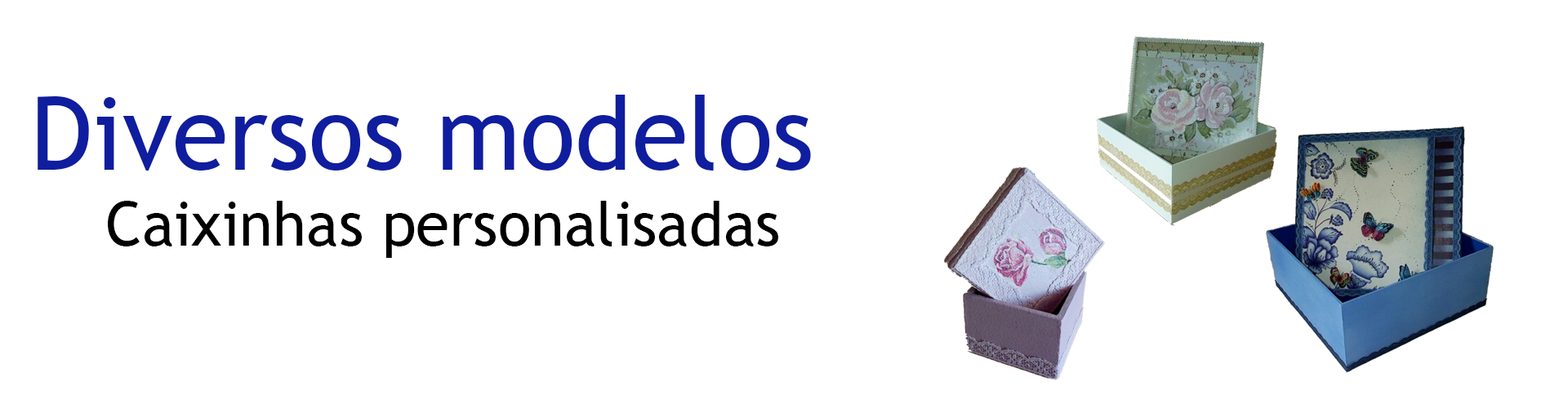
<style>
.page{position:relative;width:1568px;height:408px;background:#ffffff}
.page>*{position:absolute;margin:0}
.t1{font:102.1px "TrebuchetMS";color:#0f1d9f}
.t2{font:61.2px "TrebuchetMS";color:#000000}
</style>
<div class="page">
<p class="t1" style="left:38px;top:95px;width:773px;height:76px">Diversos modelos</p>
<p class="t2" style="left:108px;top:201px;width:670px;height:57px">Caixinhas personalisadas</p>
</div>
